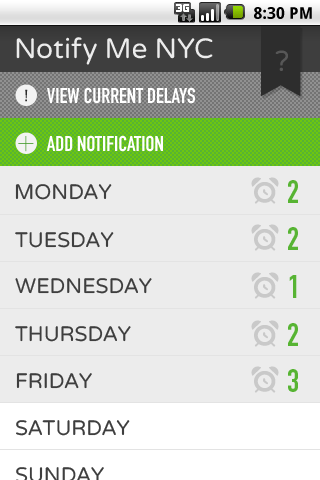
<style>
.page{position:relative;width:320px;height:480px;background:#ececec}
.page>*{position:absolute;margin:0}
.t1{font:16px "DroidSans-Bold";letter-spacing:0.005em;color:#000000}
.t2{font:28px "VarelaRound-Regular";color:#ececec}
.t3{font:29.1px "VarelaRound-Regular";color:#575757}
.t4{font:16px "DINEngschrift";color:#2d2d2d}
.t5{font:21px "DINEngschrift";color:#ffffff}
.t6{font:21px "VarelaRound-Regular";color:#3e3e3e}
.t7{font:32px "DINEngschrift";color:#57b433}
</style>
<div class="page">
<p class="t1" style="left:254px;top:7px;width:58px;height:12px">8:30 PM</p>
<p class="t2" style="left:16px;top:37px;width:197px;height:28px">Notify Me NYC</p>
<p class="t3" style="left:275px;top:50px;width:13px;height:21px">?</p>
<p class="t4" style="left:25px;top:89px;width:3px;height:13px">!</p>
<p class="t5" style="left:47px;top:87px;width:148px;height:17px">VIEW CURRENT DELAYS</p>
<p class="t5" style="left:46px;top:135px;width:117px;height:17px">ADD NOTIFICATION</p>
<p class="t6" style="left:15px;top:184px;width:97px;height:16px">MONDAY</p>
<p class="t7" style="left:288px;top:180px;width:10px;height:23px">2</p>
<p class="t6" style="left:15px;top:232px;width:99px;height:16px">TUESDAY</p>
<p class="t7" style="left:288px;top:227px;width:10px;height:23px">2</p>
<p class="t6" style="left:15px;top:278px;width:137px;height:16px">WEDNESDAY</p>
<p class="t7" style="left:289px;top:275px;width:8px;height:23px">1</p>
<p class="t6" style="left:15px;top:326px;width:116px;height:16px">THURSDAY</p>
<p class="t7" style="left:288px;top:323px;width:10px;height:23px">2</p>
<p class="t6" style="left:16px;top:373px;width:76px;height:16px">FRIDAY</p>
<p class="t7" style="left:288px;top:369px;width:10px;height:23px">3</p>
<p class="t6" style="left:16px;top:420px;width:114px;height:16px">SATURDAY</p>
</div>
